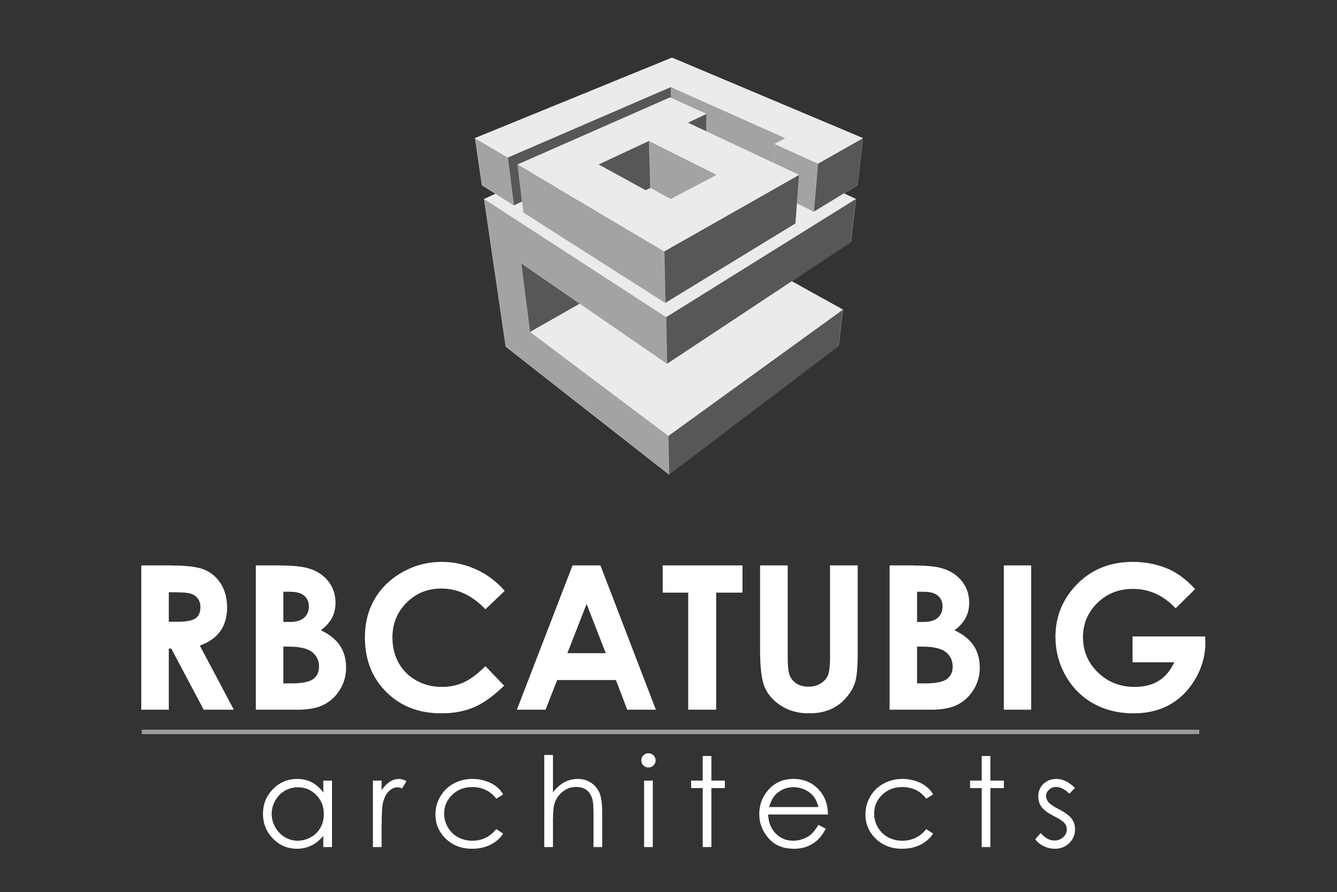
<style>
.page{position:relative;width:1337px;height:892px;background:#333333}
.page>*{position:absolute;margin:0}
.t1{font:200.6px "CenturyGothic-Bold";color:#ffffff}
.t2{font:124.8px "CenturyGothic";letter-spacing:0.2em;color:#ffffff}
</style>
<div class="page">
<p class="t1" style="left:141px;top:561px;width:1065px;height:152px">RBCATUBIG</p>
<p class="t2" style="left:263px;top:753px;width:813px;height:95px">architects</p>
</div>
